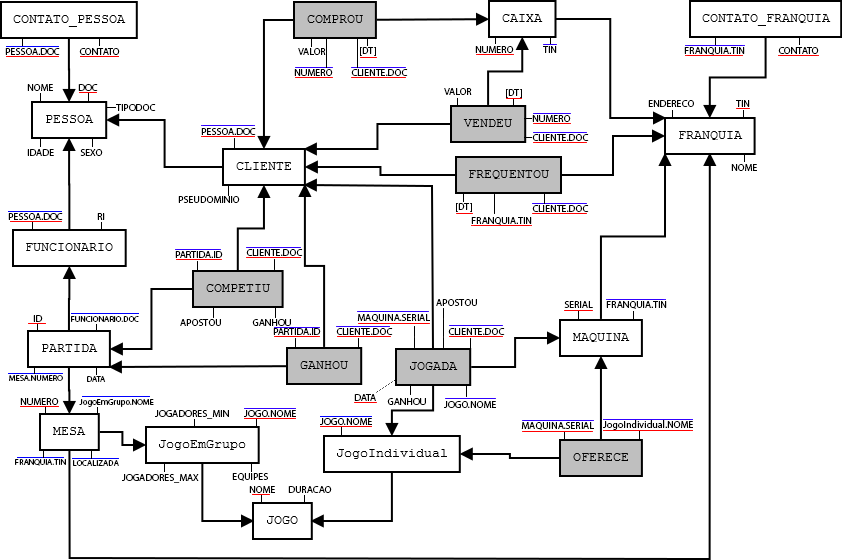
<style>
.page{position:relative;width:842px;height:560px;background:#ffffff}
.page>*{position:absolute;margin:0}
.t1{font:10px "MyriadPro-Regular";color:#000000}
.t2{font:8.4px "MyriadPro-Regular";color:#000000}
</style>
<div class="page">
<p class="t1" style="left:5px;top:48px;width:55px;height:7px">PESSOA.DOC</p>
<p class="t1" style="left:79px;top:48px;width:41px;height:7px">CONTATO</p>
<p class="t1" style="left:298px;top:48px;width:28px;height:7px">VALOR</p>
<p class="t1" style="left:360px;top:47px;width:16px;height:9px">[DT]</p>
<p class="t1" style="left:475px;top:46px;width:39px;height:7px">NUMERO</p>
<p class="t1" style="left:543px;top:46px;width:14px;height:7px">TIN</p>
<p class="t1" style="left:684px;top:47px;width:61px;height:8px">FRANQUIA.TIN</p>
<p class="t1" style="left:778px;top:47px;width:41px;height:7px">CONTATO</p>
<p class="t1" style="left:294px;top:69px;width:39px;height:7px">NUMERO</p>
<p class="t1" style="left:351px;top:69px;width:57px;height:7px">CLIENTE.DOC</p>
<p class="t1" style="left:27px;top:84px;width:26px;height:7px">NOME</p>
<p class="t1" style="left:78px;top:84px;width:20px;height:7px">DOC</p>
<p class="t1" style="left:444px;top:88px;width:28px;height:7px">VALOR</p>
<p class="t1" style="left:506px;top:89px;width:16px;height:9px">[DT]</p>
<p class="t1" style="left:648px;top:100px;width:46px;height:7px">ENDERECO</p>
<p class="t1" style="left:736px;top:100px;width:14px;height:7px">TIN</p>
<p class="t1" style="left:116px;top:104px;width:40px;height:7px">TIPODOC</p>
<p class="t1" style="left:532px;top:115px;width:39px;height:7px">NUMERO</p>
<p class="t1" style="left:201px;top:128px;width:55px;height:7px">PESSOA.DOC</p>
<p class="t1" style="left:532px;top:134px;width:57px;height:7px">CLIENTE.DOC</p>
<p class="t1" style="left:27px;top:149px;width:27px;height:7px">IDADE</p>
<p class="t1" style="left:80px;top:149px;width:23px;height:7px">SEXO</p>
<p class="t1" style="left:731px;top:164px;width:26px;height:7px">NOME</p>
<p class="t1" style="left:178px;top:196px;width:62px;height:7px">PSEUDOMINIO</p>
<p class="t1" style="left:456px;top:203px;width:16px;height:9px">[DT]</p>
<p class="t1" style="left:532px;top:205px;width:57px;height:7px">CLIENTE.DOC</p>
<p class="t1" style="left:8px;top:213px;width:55px;height:7px">PESSOA.DOC</p>
<p class="t1" style="left:97px;top:213px;width:8px;height:7px">RI</p>
<p class="t1" style="left:471px;top:217px;width:61px;height:8px">FRANQUIA.TIN</p>
<p class="t1" style="left:175px;top:251px;width:48px;height:7px">PARTIDA.ID</p>
<p class="t1" style="left:246px;top:249px;width:57px;height:7px">CLIENTE.DOC</p>
<p class="t1" style="left:436px;top:299px;width:41px;height:7px">APOSTOU</p>
<p class="t1" style="left:564px;top:301px;width:29px;height:7px">SERIAL</p>
<p class="t1" style="left:606px;top:301px;width:61px;height:8px">FRANQUIA.TIN</p>
<p class="t1" style="left:33px;top:315px;width:10px;height:7px">ID</p>
<p class="t2" style="left:71px;top:316px;width:68px;height:6px">FUNCIONARIO.DOC</p>
<p class="t1" style="left:357px;top:314px;width:73px;height:8px">MAQUINA.SERIAL</p>
<p class="t1" style="left:180px;top:319px;width:41px;height:7px">APOSTOU</p>
<p class="t1" style="left:252px;top:319px;width:39px;height:7px">GANHOU</p>
<p class="t1" style="left:273px;top:328px;width:48px;height:7px">PARTIDA.ID</p>
<p class="t1" style="left:336px;top:328px;width:57px;height:7px">CLIENTE.DOC</p>
<p class="t1" style="left:448px;top:328px;width:57px;height:7px">CLIENTE.DOC</p>
<p class="t2" style="left:9px;top:375px;width:54px;height:6px">MESA.NUMERO</p>
<p class="t2" style="left:87px;top:376px;width:19px;height:6px">DATA</p>
<p class="t1" style="left:20px;top:398px;width:39px;height:7px">NUMERO</p>
<p class="t2" style="left:79px;top:399px;width:75px;height:8px">JogoEmGrupo.NOME</p>
<p class="t1" style="left:354px;top:394px;width:22px;height:7px">DATA</p>
<p class="t1" style="left:387px;top:398px;width:39px;height:7px">GANHOU</p>
<p class="t1" style="left:444px;top:401px;width:52px;height:7px">JOGO.NOME</p>
<p class="t1" style="left:155px;top:410px;width:74px;height:9px">JOGADORES_MIN</p>
<p class="t1" style="left:244px;top:410px;width:52px;height:7px">JOGO.NOME</p>
<p class="t1" style="left:320px;top:418px;width:52px;height:7px">JOGO.NOME</p>
<p class="t1" style="left:521px;top:422px;width:73px;height:8px">MAQUINA.SERIAL</p>
<p class="t1" style="left:603px;top:420px;width:90px;height:10px">JogoIndividual.NOME</p>
<p class="t2" style="left:15px;top:459px;width:51px;height:7px">FRANQUIA.TIN</p>
<p class="t2" style="left:73px;top:460px;width:46px;height:6px">LOCALIZADA</p>
<p class="t1" style="left:232px;top:473px;width:36px;height:8px">EQUIPES</p>
<p class="t1" style="left:122px;top:474px;width:77px;height:9px">JOGADORES_MAX</p>
<p class="t1" style="left:249px;top:486px;width:26px;height:7px">NOME</p>
<p class="t1" style="left:288px;top:486px;width:44px;height:7px">DURACAO</p>
</div>
